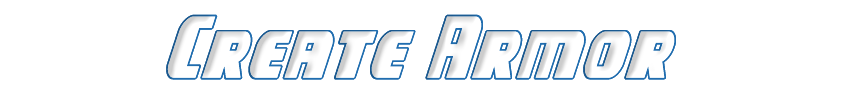
<style>
.page{position:relative;width:850px;height:100px;background:#ffffff}
.page>*{position:absolute;margin:0}
.t1{font:75px "CampJusticeOutlineItalic";color:#206daf}
</style>
<div class="page">
<p class="t1" style="left:166px;top:14px;width:510px;height:66px">Create Armor</p>
</div>
